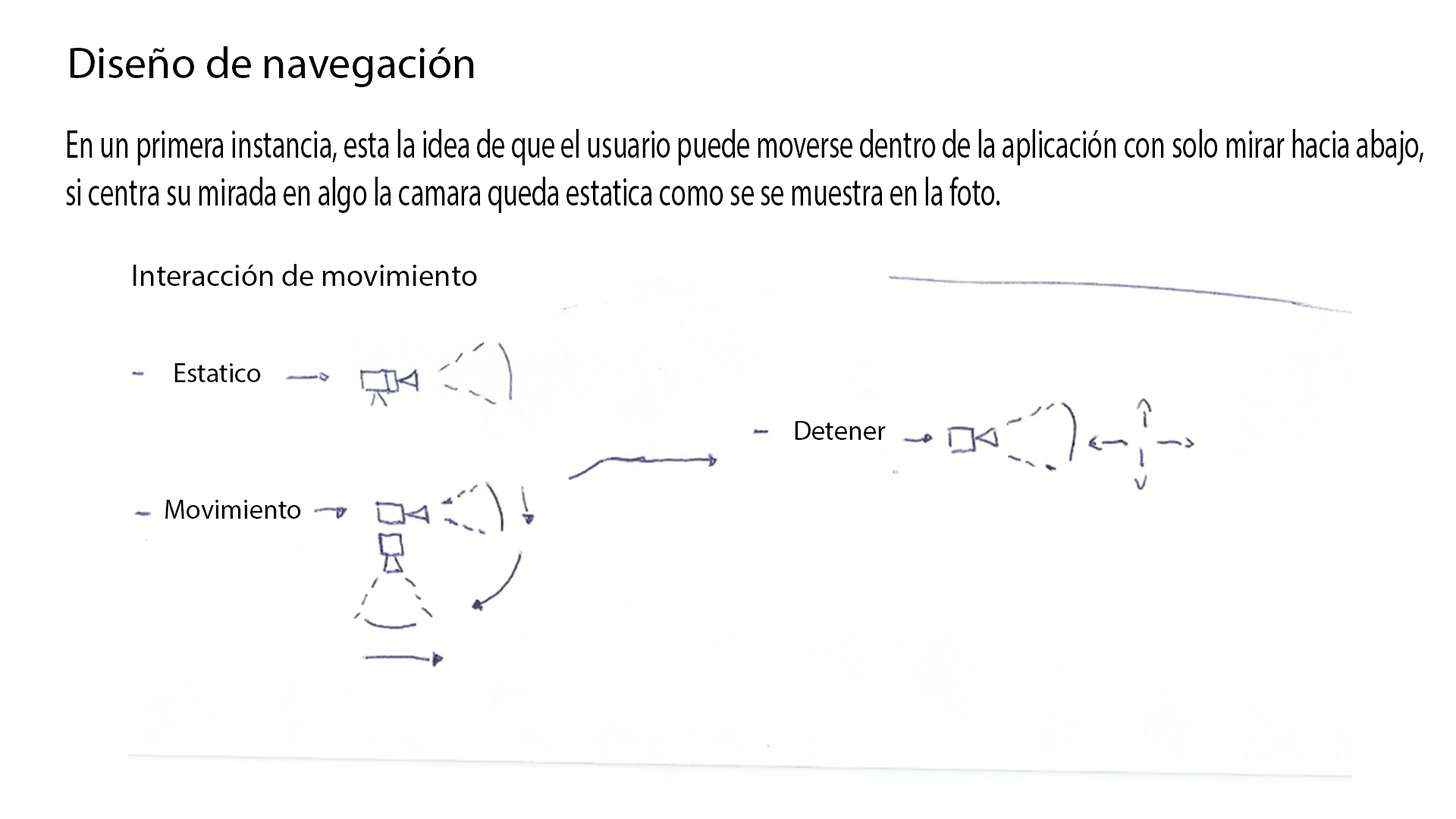
<style>
.page{position:relative;width:1456px;height:819px;background:#ffffff}
.page>*{position:absolute;margin:0}
.t1{font:44.5px "MyriadPro-Regular";color:#000000}
.t2{font:39.9px "MyriadPro-Regular";color:#000000;scale:0.68 1}
.t3{font:30.9px "MyriadPro-Regular";color:#000000}
.t4{font:27.3px "MyriadPro-Regular";color:#000000}
</style>
<div class="page">
<p class="t1" style="left:70px;top:46px;width:404px;height:41px">Diseño de navegación</p>
<p class="t2" style="left:66px;top:129px;width:1357px;height:84px">En un primera instancia, esta la idea de que el usuario puede moverse dentro de la aplicación con solo mirar hacia abajo,<br>si centra su mirada en algo la camara queda estatica como se se muestra en la foto.</p>
<p class="t3" style="left:133px;top:264px;width:344px;height:22px">Interacción de movimiento</p>
<p class="t4" style="left:174px;top:363px;width:87px;height:19px">Estatico</p>
<p class="t4" style="left:795px;top:421px;width:91px;height:19px">Detener</p>
<p class="t4" style="left:165px;top:500px;width:136px;height:19px">Movimiento</p>
</div>
